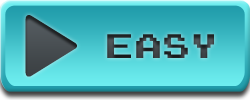
<style>
.page{position:relative;width:250px;height:100px}
.page>*{position:absolute;margin:0}
.t1{font:37px "Joystix"}
</style>
<div class="page">
<p class="t1" style="left:107px;top:34px;width:107px;height:24px">EASY</p>
</div>
